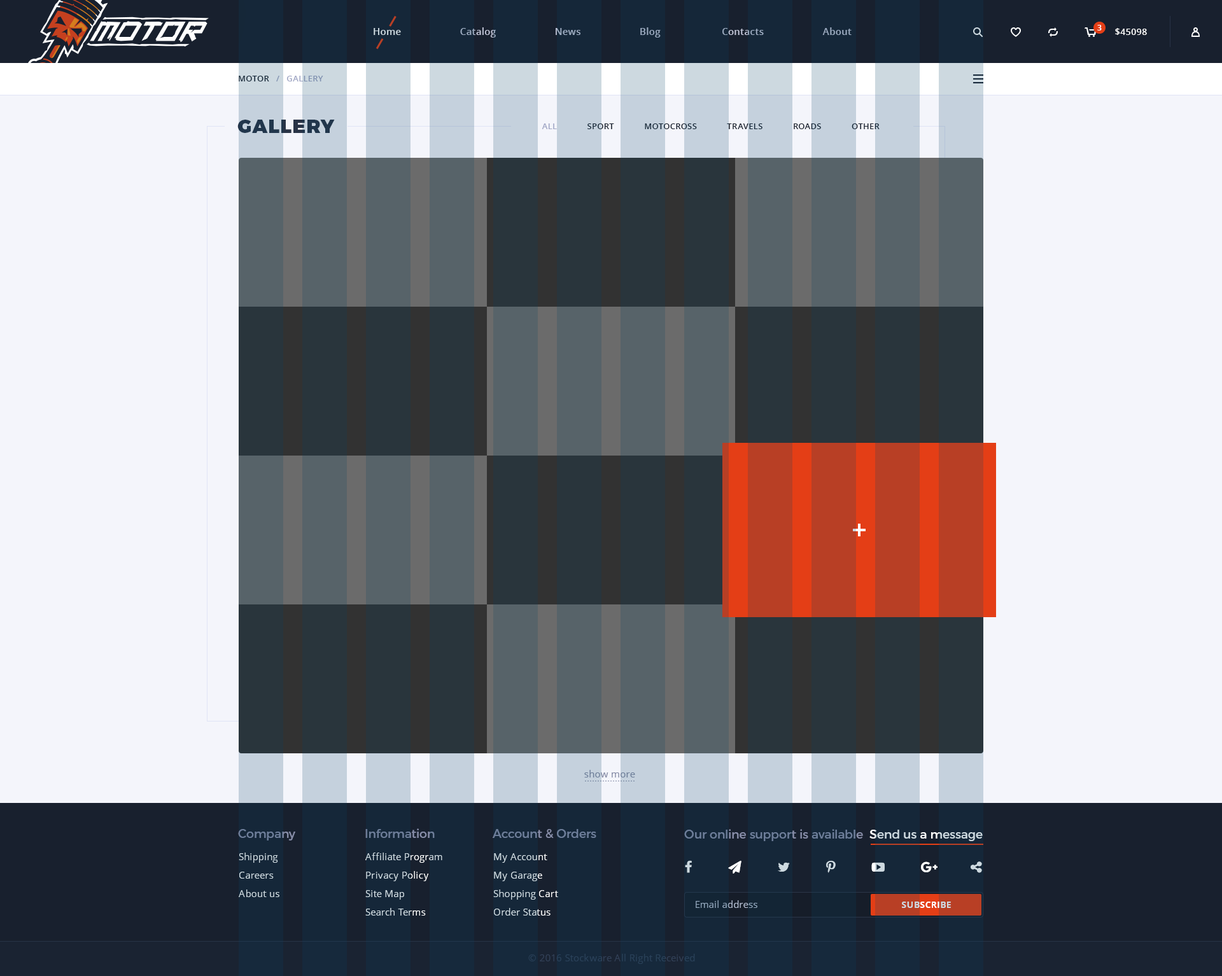
<style>
.page{position:relative;width:1222px;height:976px;background:#f4f5fb}
.page>*{position:absolute;margin:0}
.t1{font:9.5px "OpenSans-Semibold";letter-spacing:0.02em}
.t2{font:7.6px "OpenSans-Bold";color:#ffffff}
.t3{font:8.9px "OpenSans-Semibold";letter-spacing:0.02em;color:#ffffff;text-transform:uppercase}
.t4{font:8.3px "OpenSans-Semibold";letter-spacing:0.02em;text-transform:uppercase}
.t5{font:19.1px "Montserrat-Black";letter-spacing:0.06em;color:#283346;text-transform:uppercase}
.t6{font:8.3px "OpenSans-Semibold";letter-spacing:0.02em;color:#18202e;text-transform:uppercase}
.t7{font:8.3px "OpenSans-Semibold";letter-spacing:0.02em;color:#a0a6c5;text-transform:uppercase}
.t8{font:9.5px "OpenSans";letter-spacing:0.02em;color:#6d7d99}
.t9{font:12.1px "Montserrat-Regular";color:#6d7d99}
.t10{font:12.1px "Montserrat-Regular"}
.t11{font:9.5px/18.5px "OpenSans";letter-spacing:0.02em;color:#cdd9e0}
.t12{font:9.5px "OpenSans";letter-spacing:0.02em}
.t13{font:8.9px "OpenSans-Bold";letter-spacing:0.02em}
.t14{font:9.5px "OpenSans";letter-spacing:0.02em;color:#324057}
</style>
<div class="page">
<p class="t1" style="left:374px;top:27px;width:477px;height:11px">Home                      Catalog                      News                      Blog                       Contacts                      About</p>
<p class="t2" style="left:1097px;top:25px;width:4px;height:6px">3</p>
<p class="t3" style="left:1115px;top:28px;width:32px;height:7px">$45098</p>
<p class="t4" style="left:239px;top:76px;width:84px;height:5px">Motor   /   Gallery</p>
<p class="t5" style="left:237px;top:120px;width:98px;height:13px">gallery</p>
<p class="t6" style="left:541px;top:123px;width:338px;height:6px"><span class="t7">All             </span>sport             motocross             travels             roads             Other</p>
<p class="t8" style="left:584px;top:770px;width:51px;height:8px">show more</p>
<p class="t9" style="left:238px;top:829px;width:57px;height:12px">Company</p>
<p class="t9" style="left:365px;top:828px;width:70px;height:10px">Information</p>
<p class="t9" style="left:492px;top:829px;width:104px;height:10px">Account &amp; Orders</p>
<p class="t10" style="left:684px;top:829px;width:298px;height:12px">Our online support is available  Send us a message</p>
<p class="t11" style="left:239px;top:853px;width:40px;height:44px">Shipping<br>Careers<br>About us</p>
<p class="t11" style="left:365px;top:853px;width:77px;height:63px">Affiliate Program<br>Privacy Policy<br>Site Map<br>Search Terms</p>
<p class="t11" style="left:493px;top:853px;width:65px;height:63px">My Account<br>My Garage<br>Shopping Cart<br>Order Status</p>
<p class="t12" style="left:695px;top:900px;width:62px;height:8px">Email address</p>
<p class="t13" style="left:902px;top:902px;width:49px;height:6px">SUBSCRIBE</p>
<p class="t14" style="left:528px;top:954px;width:167px;height:10px">© 2016 Stockware All Right Received</p>
</div>
